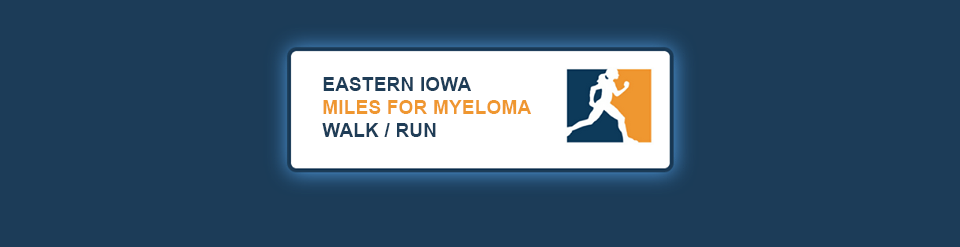
<style>
.page{position:relative;width:960px;height:247px;background:#1c3c58}
.page>*{position:absolute;margin:0}
.t1{font:19px "Arial-BoldMT";letter-spacing:0.01em;color:#ef9730}
.t2{font:19px "Arial-BoldMT";letter-spacing:0.01em;color:#1f3d57}
</style>
<div class="page">
<p class="t1" style="left:322px;top:77px;width:209px;height:60px"><span class="t2">EASTERN IOWA<br></span>MILES FOR MYELOMA<br><span class="t2">WALK / RUN</span></p>
</div>
